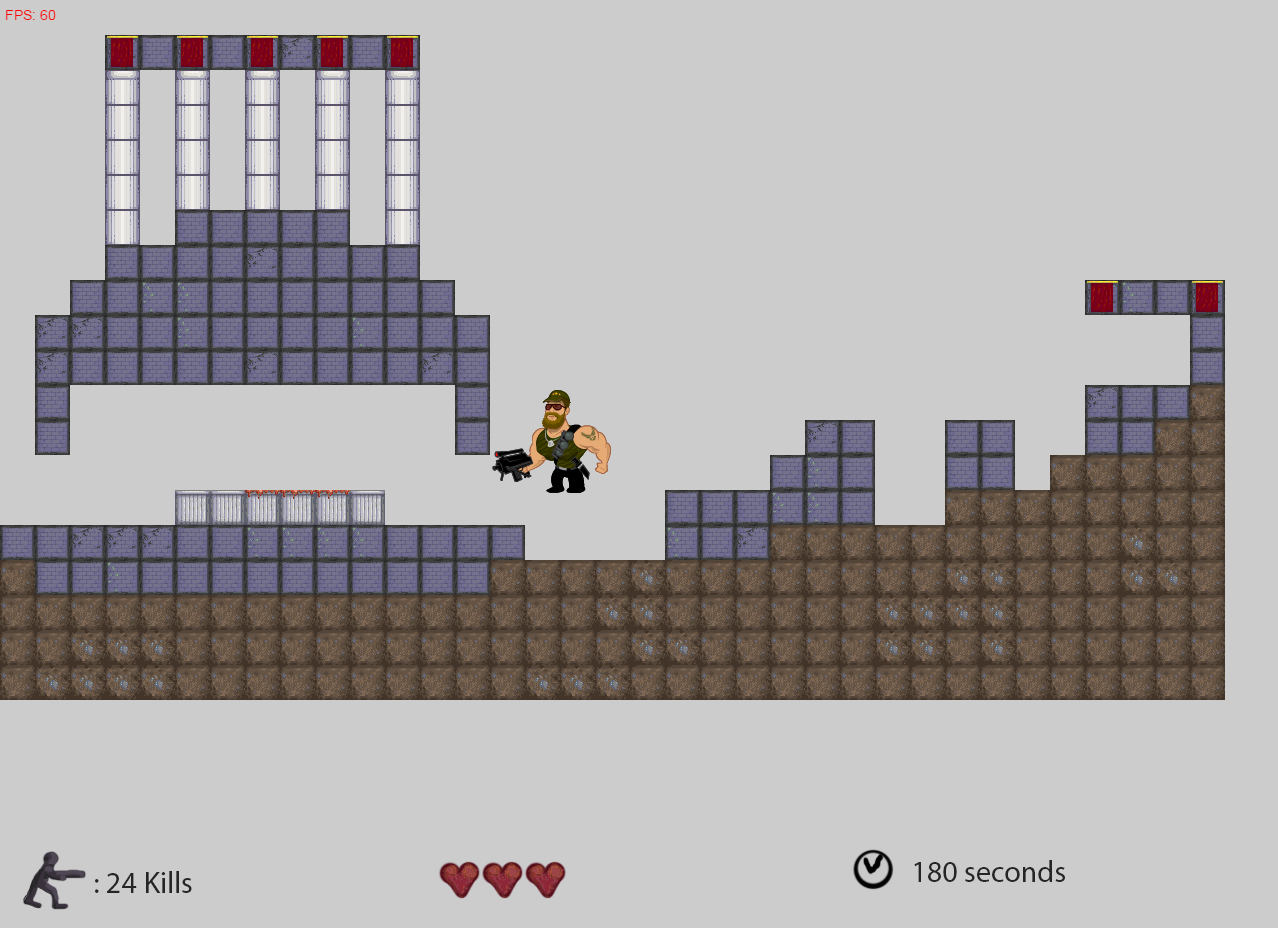
<style>
.page{position:relative;width:1278px;height:928px;background:#cccccc}
.page>*{position:absolute;margin:0}
.t1{font:30px "MyriadPro-Regular";color:#252525}
</style>
<div class="page">
<p class="t1" style="left:914px;top:860px;width:151px;height:22px">180 seconds</p>
<p class="t1" style="left:95px;top:871px;width:97px;height:22px">: 24 Kills</p>
</div>
